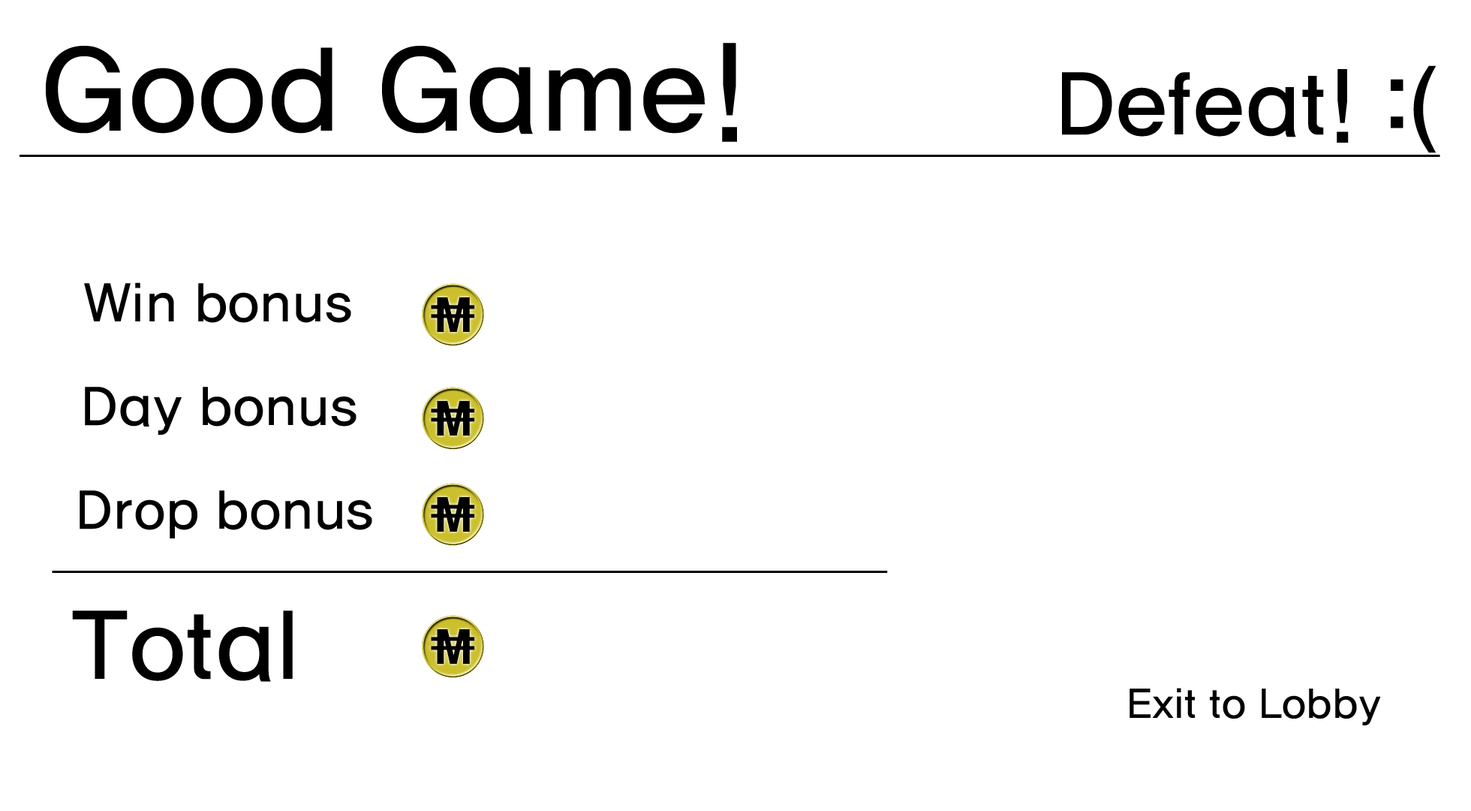
<style>
.page{position:relative;width:1471px;height:811px;background:#ffffff}
.page>*{position:absolute;margin:0}
.t1{font:122.1px "HaanYGodic23";letter-spacing:-0.065em;color:#000000}
.t2{font:91.1px "HaanYGodic23";letter-spacing:-0.065em;color:#000000}
.t3{font:56px "HaanYGodic23";letter-spacing:-0.065em;color:#000000}
.t4{font:100.1px "HaanYGodic23";letter-spacing:-0.065em;color:#000000}
</style>
<div class="page">
<p class="t1" style="left:46px;top:43px;width:691px;height:99px">Good Game!</p>
<p class="t2" style="left:1062px;top:65px;width:374px;height:88px">Defeat! :(</p>
<p class="t3" style="left:84px;top:282px;width:267px;height:41px">Win bonus</p>
<p class="t3" style="left:85px;top:387px;width:272px;height:48px">Day bonus</p>
<p class="t3" style="left:80px;top:490px;width:292px;height:48px">Drop bonus</p>
<p class="t4" style="left:72px;top:610px;width:221px;height:71px">Total</p>
</div>
